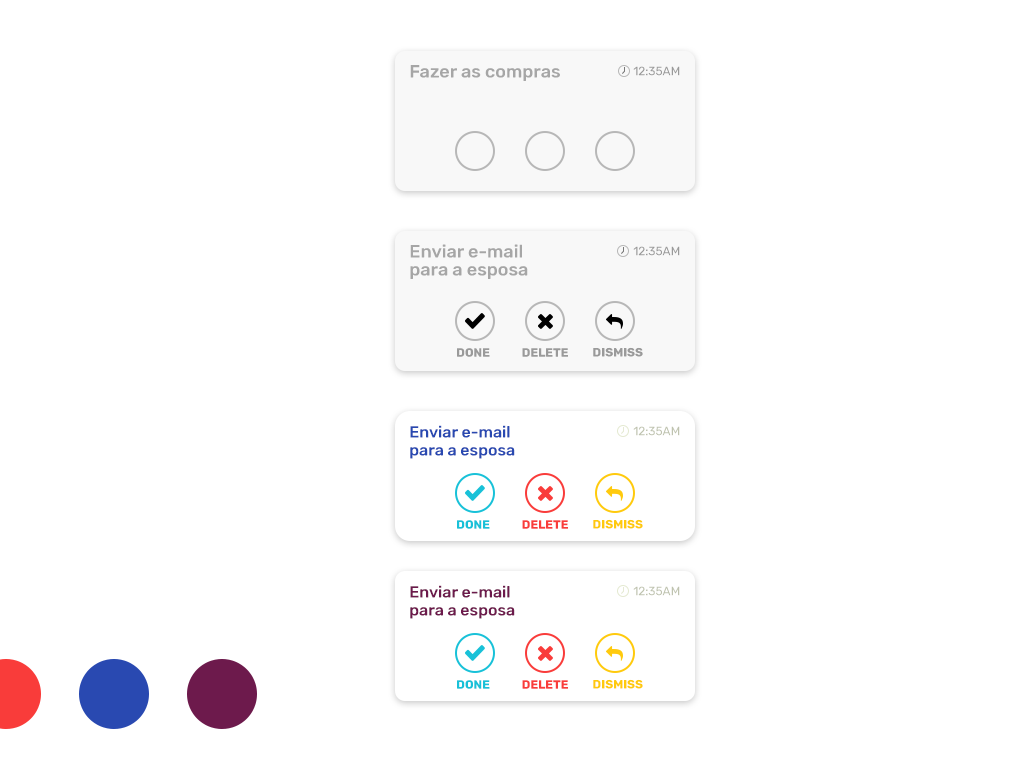
<style>
.page{position:relative;width:1024px;height:768px;background:#ffffff}
.page>*{position:absolute;margin:0}
.t1{font:18px "Rubik-Medium";color:#a6a6a6}
.t2{font:12px "Rubik-Regular";color:#9a9a9a}
.t3{font:18px/18px "Rubik-Medium";color:#a6a6a6}
.t4{font:12px "Rubik-Bold";color:#9a9a9a}
.t5{font:16px/18px "Rubik-Medium";color:#2949b1}
.t6{font:12px "Rubik-Regular";color:#bfc3af}
.t7{font:12px "Rubik-Bold";color:#18c1d8}
.t8{font:12px "Rubik-Bold";color:#f93c3a}
.t9{font:12px "Rubik-Bold";color:#ffca0d}
.t10{font:16px/18px "Rubik-Medium";color:#6d1a4c}
</style>
<div class="page">
<p class="t1" style="left:410px;top:65px;width:150px;height:16px">Fazer as compras</p>
<p class="t2" style="left:633px;top:66px;width:47px;height:10px">12:35AM</p>
<p class="t3" style="left:410px;top:244px;width:118px;height:35px">Enviar e-mail<br>para a esposa</p>
<p class="t2" style="left:633px;top:246px;width:47px;height:10px">12:35AM</p>
<p class="t4" style="left:457px;top:348px;width:33px;height:9px">DONE</p>
<p class="t4" style="left:522px;top:348px;width:46px;height:9px">DELETE</p>
<p class="t4" style="left:593px;top:347px;width:50px;height:10px">DISMISS</p>
<p class="t5" style="left:410px;top:425px;width:105px;height:34px">Enviar e-mail<br>para a esposa</p>
<p class="t6" style="left:633px;top:426px;width:47px;height:10px">12:35AM</p>
<p class="t7" style="left:457px;top:520px;width:33px;height:9px">DONE</p>
<p class="t8" style="left:522px;top:520px;width:46px;height:9px">DELETE</p>
<p class="t9" style="left:593px;top:519px;width:50px;height:10px">DISMISS</p>
<p class="t10" style="left:410px;top:585px;width:105px;height:34px">Enviar e-mail<br>para a esposa</p>
<p class="t6" style="left:633px;top:586px;width:47px;height:10px">12:35AM</p>
<p class="t7" style="left:457px;top:680px;width:33px;height:9px">DONE</p>
<p class="t8" style="left:522px;top:680px;width:46px;height:9px">DELETE</p>
<p class="t9" style="left:593px;top:679px;width:50px;height:10px">DISMISS</p>
</div>
